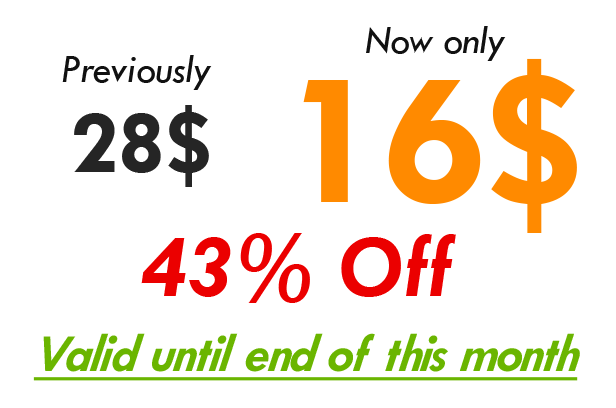
<style>
.page{position:relative;width:616px;height:408px;background:#ffffff}
.page>*{position:absolute;margin:0}
.t1{font:41px "TwCenMT-Italic";letter-spacing:-0.02em;color:#111111}
.t2{font:195px "TwCenMT-Bold";letter-spacing:-0.02em;color:#ff8a00}
.t3{font:92px "TwCenMT-Bold";letter-spacing:-0.02em;color:#252525}
.t4{font:90px "TwCenMT-BoldItalic";letter-spacing:-0.02em;color:#eb0000}
.t5{font:54px "TwCenMT-BoldItalic";letter-spacing:-0.02em;color:#6ab500;font-style:italic;text-decoration:underline}
</style>
<div class="page">
<p class="t1" style="left:366px;top:26px;width:140px;height:35px">Now only</p>
<p class="t1" style="left:62px;top:55px;width:150px;height:35px">Previously</p>
<p class="t2" style="left:303px;top:58px;width:274px;height:175px">16$</p>
<p class="t3" style="left:74px;top:105px;width:135px;height:82px">28$</p>
<p class="t4" style="left:141px;top:233px;width:315px;height:70px">43% Off</p>
<p class="t5" style="left:33px;top:333px;width:547px;height:48px">Valid until end of this month</p>
</div>
